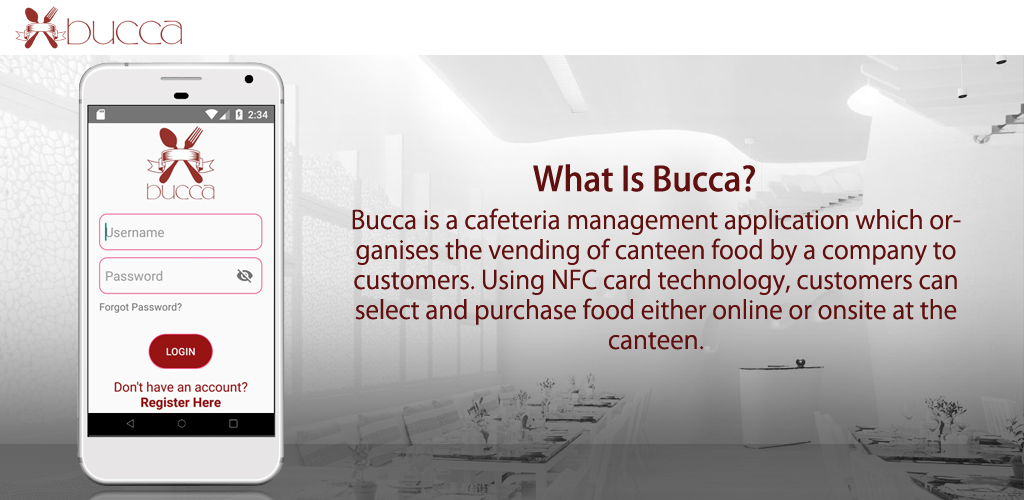
<style>
.page{position:relative;width:1024px;height:500px}
.page>*{position:absolute;margin:0}
.t1{font:33.3px "KozGoPro-Medium";color:#60100e}
.t2{font:25px "KozGoPro-Regular";color:#60100e}
</style>
<div class="page">
<p class="t1" style="left:533px;top:164px;width:222px;height:28px">What Is Bucca?</p>
<p class="t2" style="left:352px;top:208px;width:609px;height:142px;text-align:center">Bucca is a cafeteria management application which organises the vending of canteen food by a company to customers. Using NFC card technology, customers can select and purchase food either online or onsite at the canteen.</p>
</div>
